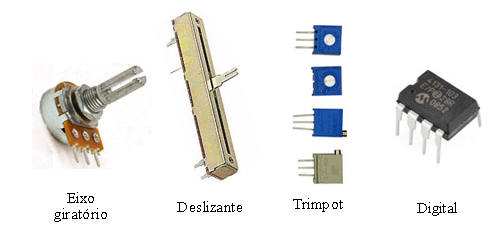
<style>
.page{position:relative;width:500px;height:233px;background:#ffffff}
.page>*{position:absolute;margin:0}
.t1{font:14.7px/16px "TimesNewRomanPSMT";letter-spacing:0.03em;color:#000000;scale:1.09 1}
.t2{font:14.7px "TimesNewRomanPSMT";letter-spacing:0.03em;color:#000000;scale:1.09 1}
</style>
<div class="page">
<p class="t1" style="left:54px;top:192px;width:53px;height:30px;text-align:center">Eixo<br>giratório</p>
<p class="t2" style="left:293px;top:198px;width:50px;height:14px">Trimpot</p>
<p class="t2" style="left:177px;top:201px;width:65px;height:11px">Deslizante</p>
<p class="t2" style="left:417px;top:202px;width:40px;height:14px">Digital</p>
</div>
